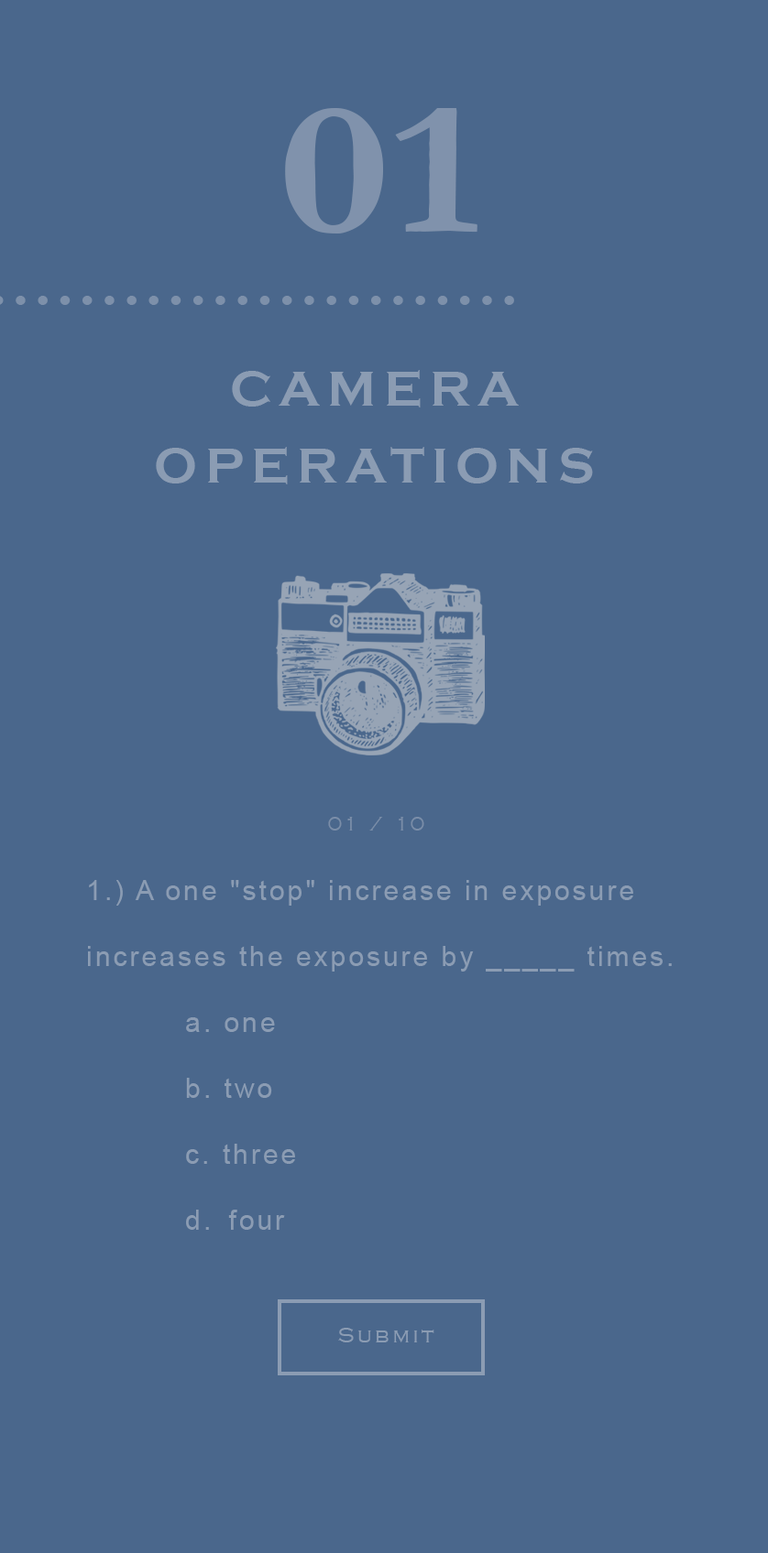
<style>
.page{position:relative;width:768px;height:1553px;background:#4a678c}
.page>*{position:absolute;margin:0}
.t1{font:190.5px "Garamond-Bold";color:#8b9cb3;scale:1.25 1}
.t2{font:50.4px/76.9px "CopperplateGothic-Bold";letter-spacing:0.15em;color:#8b9cb3}
.t3{font:20.2px "CopperplateGothic-Light";letter-spacing:0.15em;color:#8b9cb3}
.t4{font:20.2px "CopperplateGothic-Light";letter-spacing:0.15em;color:#e9eef2}
.t5{font:27.5px/65.9px "ArialMT";letter-spacing:0.1em;color:#8b9cb3}
.t6{font:22px "CopperplateGothic-Light";letter-spacing:0.15em;color:#8b9cb3}
</style>
<div class="page">
<p class="t1" style="left:285px;top:108px;width:192px;height:126px;opacity:0.8">01</p>
<p class="t2" style="left:156px;top:370px;width:437px;height:115px;text-align:center">CAMERA<br>OPERATIONS</p>
<p class="t3" style="left:328px;top:817px;width:96px;height:14px;opacity:0.7"><span class="t4"><br></span>01 / 10</p>
<p class="t5" style="left:88px;top:880px;width:583px;height:350px">1.) A one "stop" increase in exposure <br>increases the exposure by _____ times.<br>   a. one<br>   b. two<br>   c. three<br>   d.  four</p>
<p class="t6" style="left:338px;top:1328px;width:96px;height:15px">Submit</p>
</div>
